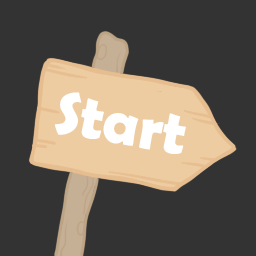
<style>
.page{position:relative;width:256px;height:256px;background:#333333}
.page>*{position:absolute;margin:0}
.t1{font:62px "BerlinSansFBDemi-Bold";color:#ffffff}
</style>
<div class="page">
<p class="t1" style="left:55px;top:92px;width:131px;height:62px;rotate:11deg">Start</p>
</div>
